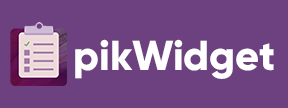
<style>
.page{position:relative;width:288px;height:108px;background:#6d407f}
.page>*{position:absolute;margin:0}
.t1{font:41.7px "Gilroy-ExtraBold";color:#ffffff}
</style>
<div class="page">
<p class="t1" style="left:75px;top:39px;width:199px;height:40px">pikWidget</p>
</div>
